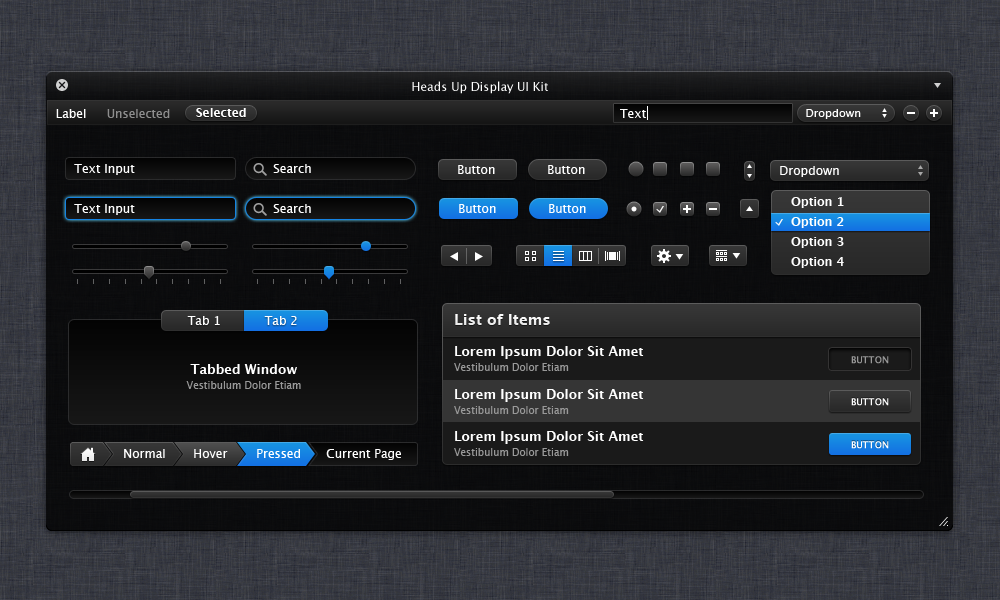
<style>
.page{position:relative;width:1000px;height:600px}
.page>*{position:absolute;margin:0}
.t1{font:12px "LucidaGrande";color:#ffffff}
.t2{font:12px "LucidaGrande";color:#8e8e8e}
.t3{font:12px "LucidaGrande-Bold";color:#ffffff}
.t4{font:11px "LucidaGrande";color:#ffffff}
.t5{font:12px/20px "LucidaGrande-Bold";color:#ffffff}
.t6{font:15px "LucidaGrande-Bold";color:#f2f2f2}
.t7{font:13px/10px "LucidaGrande-Bold";color:#ffffff}
.t8{font:10px/12px "LucidaGrande";color:#999999}
.t9{font:9px "LucidaGrande";letter-spacing:0.025em;color:#999999;text-transform:uppercase;font-weight:bold}
.t10{font:9px "LucidaGrande";letter-spacing:0.025em;color:#ffffff;text-transform:uppercase;font-weight:bold}
</style>
<div class="page">
<p class="t1" style="left:412px;top:81px;width:136px;height:13px">Heads Up Display UI Kit</p>
<p class="t1" style="left:56px;top:109px;width:30px;height:9px">Label</p>
<p class="t2" style="left:107px;top:109px;width:63px;height:9px">Unselected</p>
<p class="t3" style="left:196px;top:108px;width:50px;height:9px">Selected</p>
<p class="t1" style="left:620px;top:109px;width:26px;height:9px">Text</p>
<p class="t4" style="left:806px;top:109px;width:55px;height:10px">Dropdown</p>
<p class="t1" style="left:74px;top:164px;width:61px;height:11px">Text Input</p>
<p class="t1" style="left:273px;top:164px;width:38px;height:9px">Search</p>
<p class="t1" style="left:458px;top:165px;width:37px;height:9px">Button</p>
<p class="t1" style="left:548px;top:165px;width:37px;height:9px">Button</p>
<p class="t1" style="left:780px;top:166px;width:59px;height:11px">Dropdown</p>
<p class="t5" style="left:791px;top:197px;width:53px;height:71px">Option 1<br>Option 2<br>Option 3<br>Option 4</p>
<p class="t1" style="left:74px;top:204px;width:61px;height:11px">Text Input</p>
<p class="t1" style="left:273px;top:204px;width:38px;height:9px">Search</p>
<p class="t1" style="left:459px;top:204px;width:37px;height:9px">Button</p>
<p class="t1" style="left:549px;top:204px;width:37px;height:9px">Button</p>
<p class="t1" style="left:187px;top:316px;width:33px;height:9px">Tab 1</p>
<p class="t1" style="left:264px;top:316px;width:33px;height:9px">Tab 2</p>
<p class="t6" style="left:455px;top:314px;width:95px;height:11px">List of Items</p>
<p class="t7" style="left:454px;top:346px;width:190px;height:25px">Lorem Ipsum Dolor Sit Amet<br><span class="t8">Vestibulum Dolor Etiam</span></p>
<p class="t8" style="left:186px;top:364px;width:115px;height:25px;text-align:center"><span class="t7">Tabbed Window<br></span>Vestibulum Dolor Etiam</p>
<p class="t9" style="left:851px;top:356px;width:38px;height:8px">Button</p>
<p class="t7" style="left:454px;top:389px;width:190px;height:25px">Lorem Ipsum Dolor Sit Amet<br><span class="t8">Vestibulum Dolor Etiam</span></p>
<p class="t10" style="left:851px;top:398px;width:38px;height:8px">Button</p>
<p class="t7" style="left:454px;top:431px;width:190px;height:25px">Lorem Ipsum Dolor Sit Amet<br><span class="t8">Vestibulum Dolor Etiam</span></p>
<p class="t1" style="left:124px;top:449px;width:41px;height:9px">Normal</p>
<p class="t1" style="left:194px;top:449px;width:34px;height:9px">Hover</p>
<p class="t1" style="left:257px;top:449px;width:43px;height:9px">Pressed</p>
<p class="t1" style="left:326px;top:449px;width:75px;height:11px">Current Page</p>
<p class="t10" style="left:851px;top:441px;width:38px;height:8px">Button</p>
</div>
